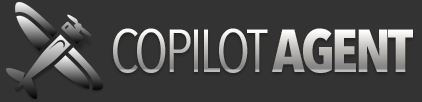
<style>
.page{position:relative;width:422px;height:102px;background:#333333}
.page>*{position:absolute;margin:0}
.t1{font:60px "AvenirNextCondensed-Regular";letter-spacing:-0.05em}
.t2{font:60px "AvenirNextCondensed-Bold";letter-spacing:-0.05em}
</style>
<div class="page">
<p class="t1" style="left:113px;top:28px;width:300px;height:45px">COPILOT <span class="t2">AGENT</span></p>
</div>
